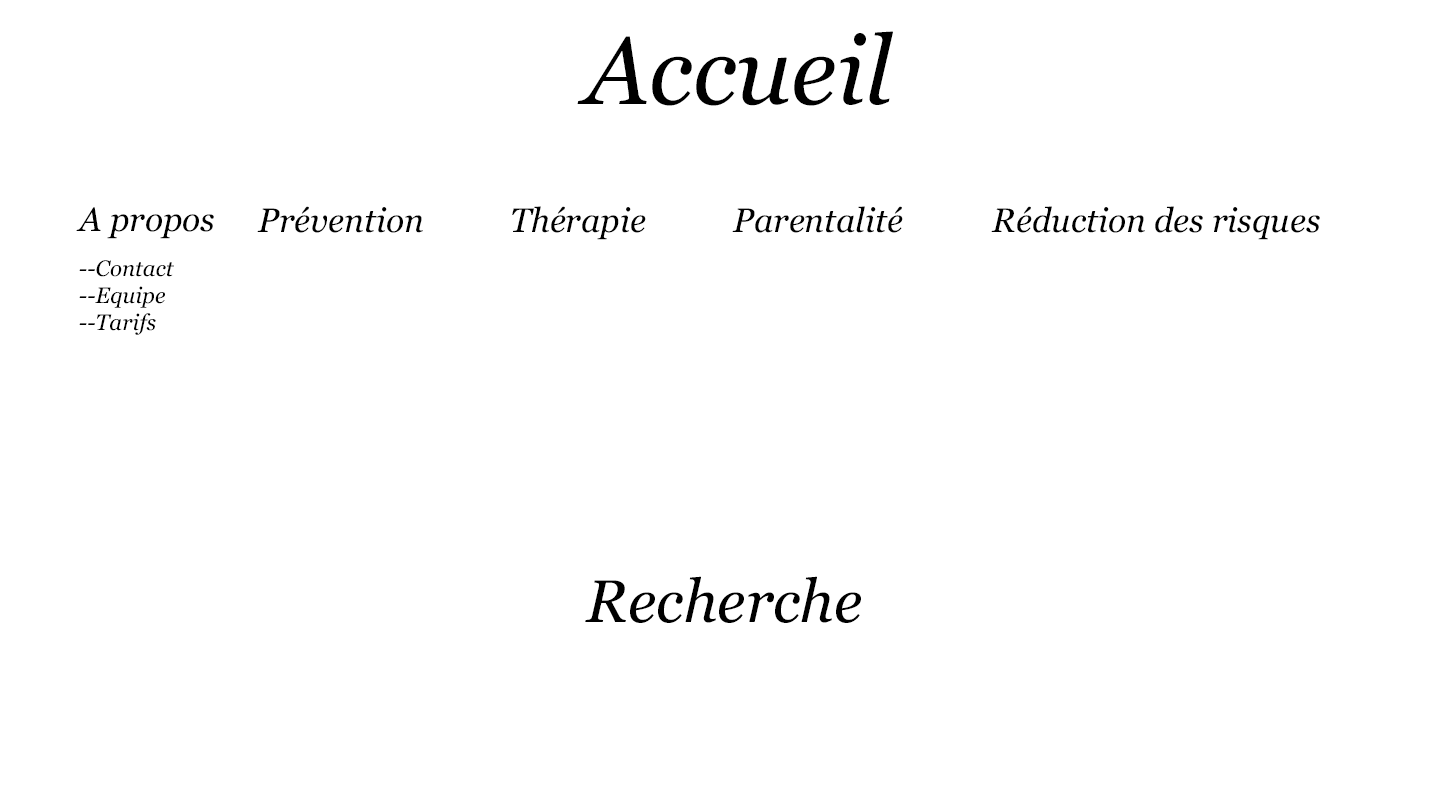
<style>
.page{position:relative;width:1440px;height:800px;background:#ffffff}
.page>*{position:absolute;margin:0}
.t1{font:96px "Georgia-Italic";color:#000000}
.t2{font:22.3px "Georgia-Italic";color:#000000}
.t3{font:33.6px/18.1px "Georgia-Italic";color:#000000}
.t4{font:33.6px "Georgia-Italic";color:#000000}
.t5{font:60px "Georgia-Italic";color:#000000}
</style>
<div class="page">
<p class="t1" style="left:577px;top:31px;width:316px;height:75px">Accueil</p>
<p class="t2" style="left:76px;top:207px;width:138px;height:128px"><span class="t3">A propos<br><br></span>--Contact<br>--Equipe<br>--Tarifs</p>
<p class="t4" style="left:257px;top:206px;width:166px;height:27px">Prévention</p>
<p class="t4" style="left:512px;top:206px;width:134px;height:34px">Thérapie</p>
<p class="t4" style="left:732px;top:206px;width:171px;height:27px">Parentalité</p>
<p class="t4" style="left:991px;top:206px;width:329px;height:34px">Réduction des risques</p>
<p class="t5" style="left:585px;top:576px;width:276px;height:47px">Recherche</p>
</div>
